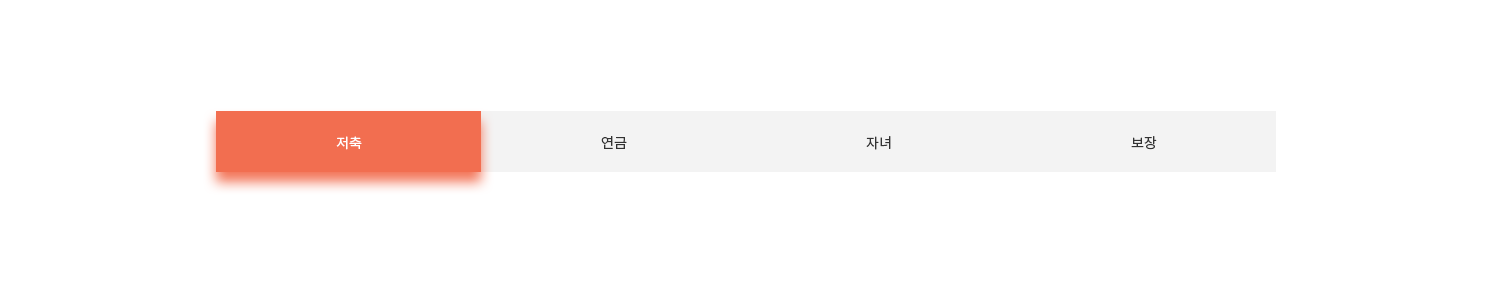
<style>
.page{position:relative;width:1500px;height:300px;background:#ffffff}
.page>*{position:absolute;margin:0}
.t1{font:14px "NotoSansKR-Regular";color:#ffffff}
.t2{font:14px "NotoSansKR-Regular";color:#333333}
</style>
<div class="page">
<p class="t1" style="left:336px;top:136px;width:26px;height:14px">저축</p>
<p class="t2" style="left:601px;top:136px;width:26px;height:13px">연금</p>
<p class="t2" style="left:866px;top:136px;width:25px;height:14px">자녀</p>
<p class="t2" style="left:1131px;top:136px;width:26px;height:14px">보장</p>
</div>
